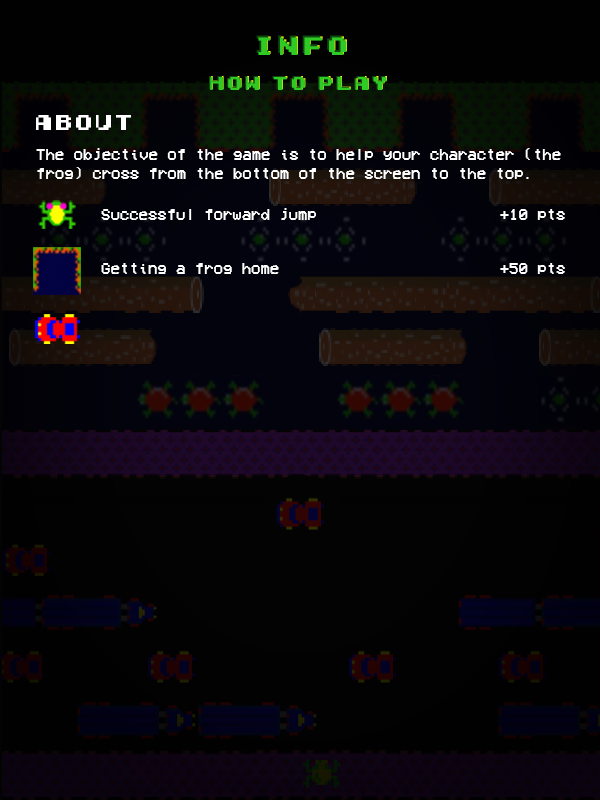
<style>
.page{position:relative;width:600px;height:800px}
.page>*{position:absolute;margin:0}
.t1{font:23.3px "Early-GameBoy";letter-spacing:0.05em}
.t2{font:23.3px "Early-GameBoy";letter-spacing:0.05em;color:#2fca24}
.t3{font:17.2px "Early-GameBoy";letter-spacing:0.05em}
.t4{font:17.2px "Early-GameBoy";letter-spacing:0.05em;color:#2fca24}
.t5{font:20px "Early-GameBoy";color:#ffffff}
.t6{font:16px "VCROSDMono";color:#ffffff}
</style>
<div class="page">
<p class="t1" style="left:256px;top:35px;width:89px;height:18px">INFO</p>
<p class="t2" style="left:258px;top:37px;width:89px;height:18px">INFO</p>
<p class="t2" style="left:259px;top:36px;width:88px;height:18px">INFO</p>
<p class="t3" style="left:209px;top:76px;width:177px;height:13px">HOW TO PLAY</p>
<p class="t4" style="left:210px;top:76px;width:177px;height:13px">HOW TO PLAY</p>
<p class="t4" style="left:210px;top:77px;width:177px;height:13px">HOW TO PLAY</p>
<p class="t5" style="left:36px;top:115px;width:95px;height:15px">About</p>
<p class="t6" style="left:36px;top:148px;width:525px;height:31px">The objective of the game is to help your character (the frog) cross from the bottom of the screen to the top.</p>
<p class="t6" style="left:101px;top:208px;width:215px;height:12px">Successful forward jump</p>
<p class="t6" style="left:500px;top:209px;width:65px;height:11px">+10 pts</p>
<p class="t6" style="left:101px;top:263px;width:178px;height:11px">Getting a frog home</p>
<p class="t6" style="left:500px;top:263px;width:65px;height:11px">+50 pts</p>
</div>
